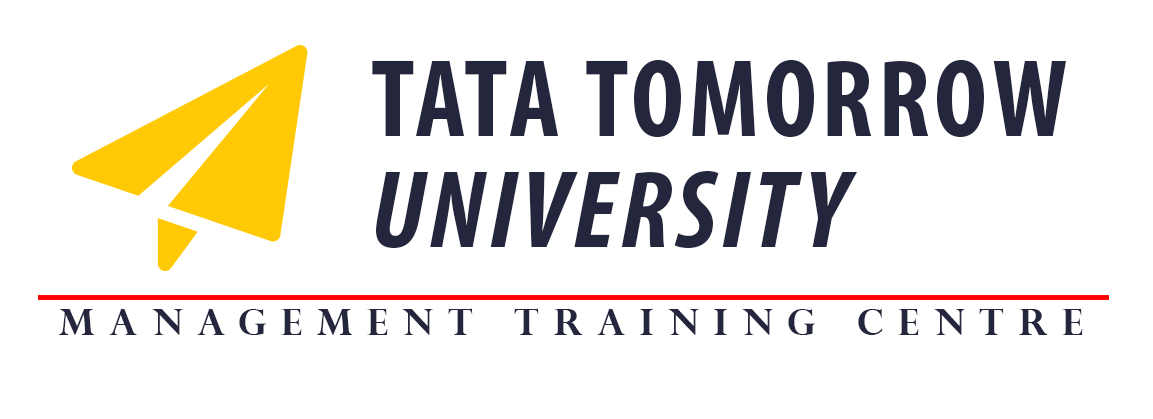
<style>
.page{position:relative;width:1153px;height:419px;background:#ffffff}
.page>*{position:absolute;margin:0}
.t1{font:110.8px/110.8px "MyriadPro-BoldCond";letter-spacing:0.04em;color:#24263d}
.t2{font:110.8px/110.8px "MyriadPro-BoldCondIt";letter-spacing:0.04em;color:#24263d}
.t3{font:35.6px "PerpetuaTitlingMT-Bold";letter-spacing:0.42em;color:#24263d}
</style>
<div class="page">
<p class="t1" style="left:372px;top:59px;width:694px;height:189px">TATA TOMORROW <br><span class="t2">UNIVERSITY</span></p>
<p class="t3" style="left:59px;top:308px;width:1024px;height:27px">Management Training Centre</p>
</div>
